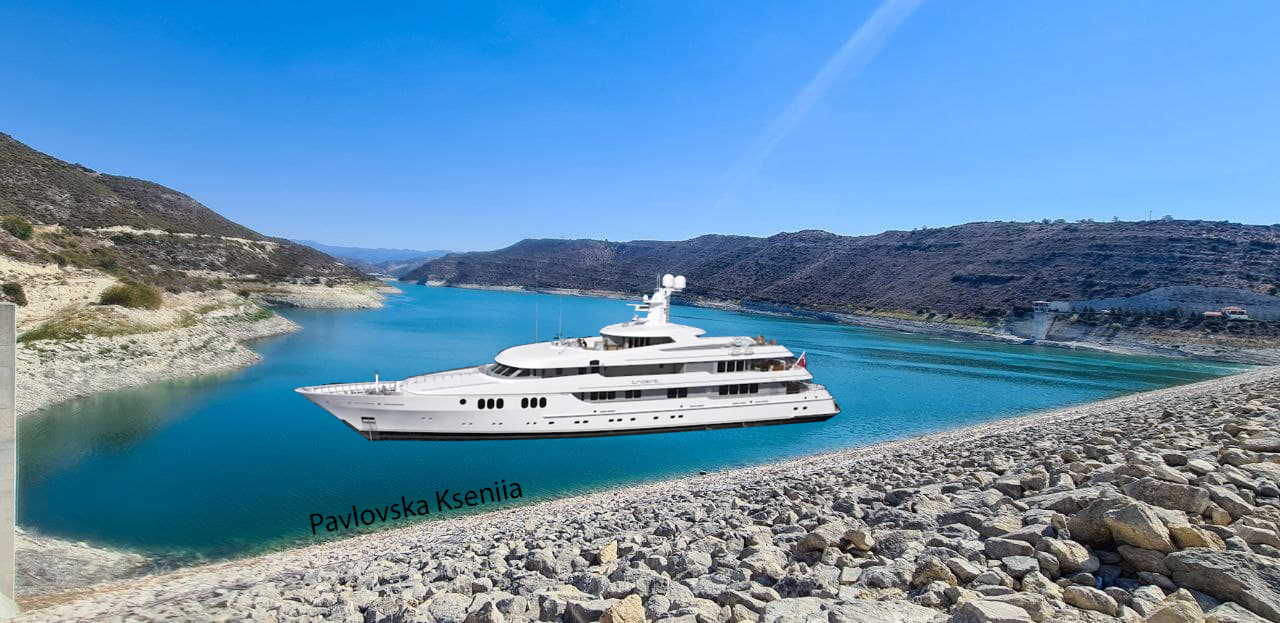
<style>
.page{position:relative;width:1280px;height:623px}
.page>*{position:absolute;margin:0}
.t1{font:30px "MyriadPro-Regular";color:#000000}
</style>
<div class="page">
<p class="t1" style="left:309px;top:479px;width:214px;height:56px;rotate:-10deg">Pavlovska Kseniia</p>
</div>
